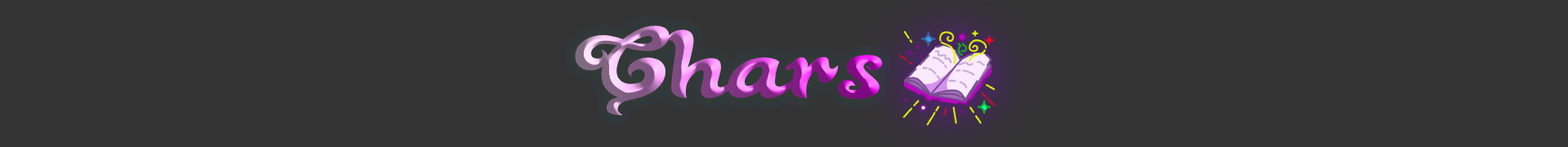
<style>
.page{position:relative;width:1568px;height:147px;background:#333333}
.page>*{position:absolute;margin:0}
.t1{font:108.8px "BlackRose";scale:1.2 1}
</style>
<div class="page">
<p class="t1" style="left:575px;top:25px;width:308px;height:91px">Chars</p>
</div>
